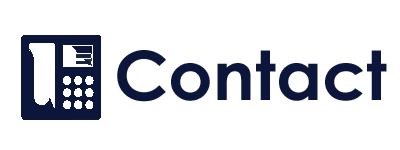
<style>
.page{position:relative;width:400px;height:150px;background:#ffffff}
.page>*{position:absolute;margin:0}
.t1{font:67.9px "CenturyGothic-Bold";color:#0c163a}
</style>
<div class="page">
<p class="t1" style="left:117px;top:50px;width:270px;height:52px">Contact</p>
</div>
